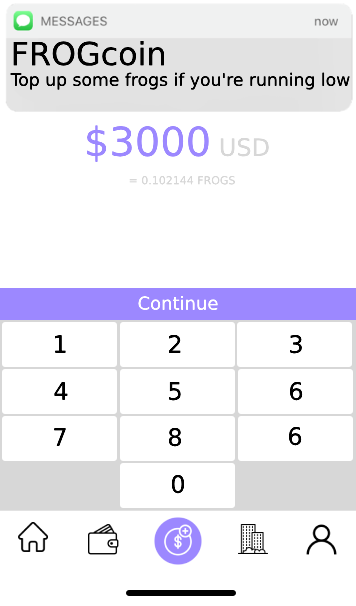
<style>
.page{position:relative;width:356px;height:606px;background:#ffffff}
.page>*{position:absolute;margin:0}
.t1{font:17.2px "DejaVuSans";color:#000000}
.t2{font:31.8px "DejaVuSans";color:#9c88ff}
.t3{font:31.8px "DejaVuSans";color:#000000}
.t4{font:40px "DejaVuSans";color:#9c88ff}
.t5{font:24px "DejaVuSans";color:#d7d7d7}
.t6{font:11px "DejaVuSans";color:#d7d7d7}
</style>
<div class="page">
<p class="t1" style="left:10px;top:41px;width:340px;height:49px"><span class="t2">F</span><span class="t3">ROGcoin<br></span>Top up some frogs if you're running low</p>
<p class="t4" style="left:87px;top:125px;width:182px;height:37px">$3000 <span class="t5">USD</span></p>
<p class="t6" style="left:129px;top:176px;width:106px;height:9px">= 0.102144 FROGS</p>
</div>
